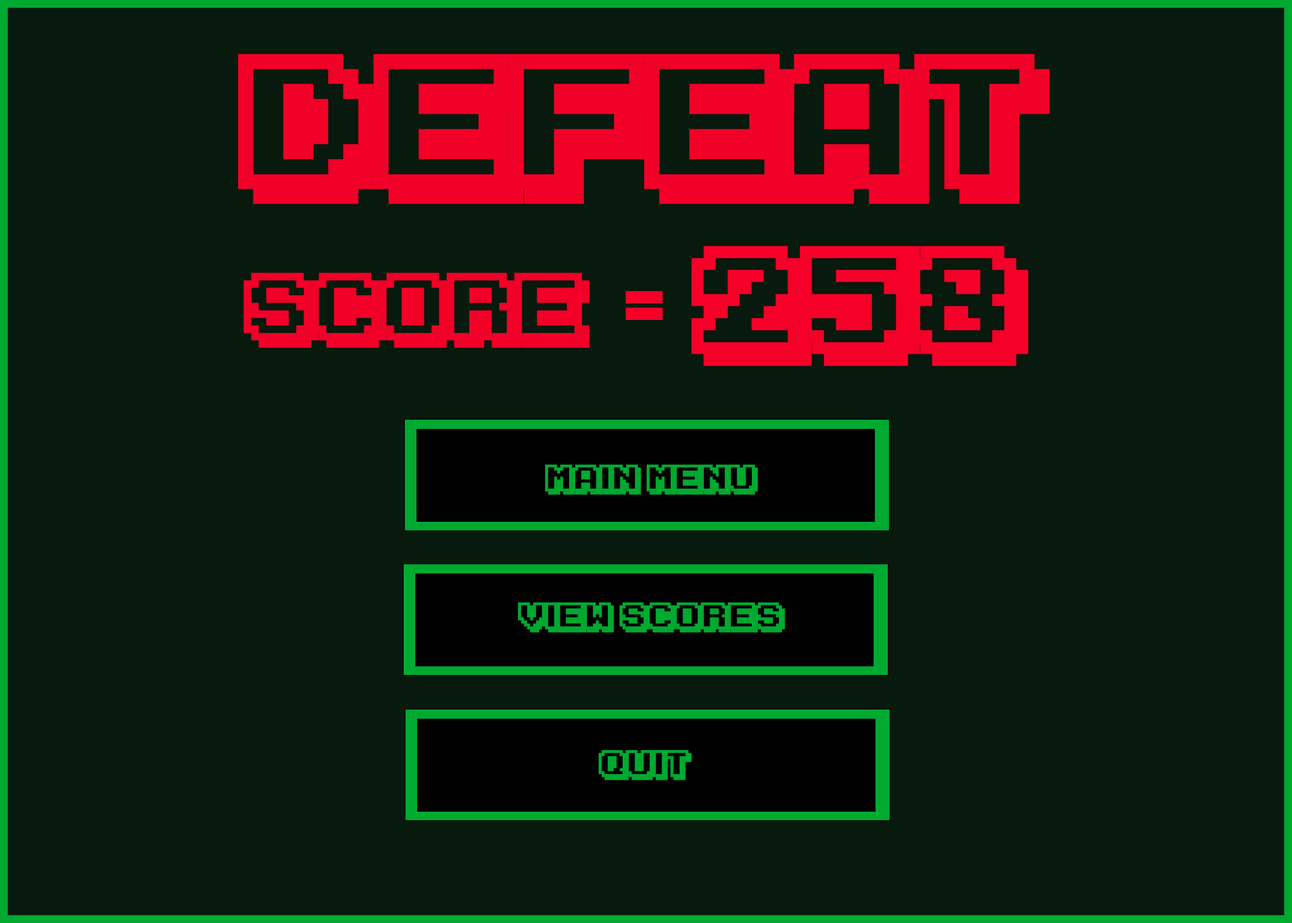
<style>
.page{position:relative;width:1292px;height:923px;background:#08190d}
.page>*{position:absolute;margin:0}
.t1{font:153.8px "KarmaticArcade";color:#f10028}
.t2{font:123.1px "KarmaticArcade";color:#f40029}
.t3{font:76.9px "KarmaticArcade";color:#f10028}
.t4{font:76.9px "KarmaticArcade";color:#00a930}
.t5{font:30.8px "KarmaticArcade";color:#00a930}
</style>
<div class="page">
<p class="t1" style="left:238px;top:54px;width:812px;height:150px">defeat</p>
<p class="t2" style="left:692px;top:245px;width:337px;height:121px">258</p>
<p class="t3" style="left:244px;top:273px;width:345px;height:75px">Score <span class="t4">::</span></p>
<p class="t5" style="left:545px;top:465px;width:213px;height:30px">Main Menu</p>
<p class="t5" style="left:518px;top:602px;width:267px;height:30px">View Scores</p>
<p class="t5" style="left:599px;top:750px;width:93px;height:30px">QUit</p>
</div>
